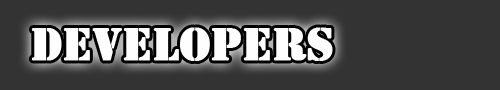
<style>
.page{position:relative;width:500px;height:90px;background:#333333}
.page>*{position:absolute;margin:0}
.t1{font:48px "Stencil";color:#fefefe;font-weight:bold}
</style>
<div class="page">
<p class="t1" style="left:31px;top:27px;width:302px;height:34px">Developers</p>
</div>
